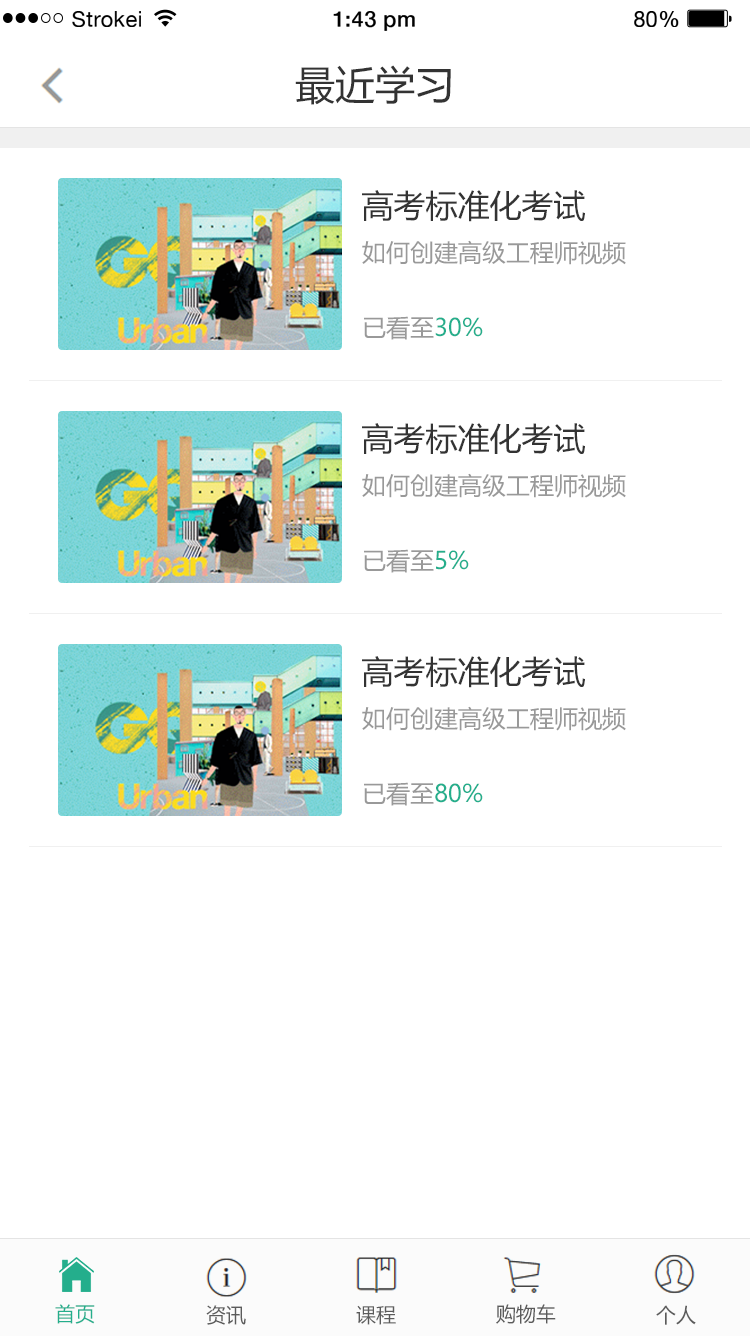
<style>
.page{position:relative;width:750px;height:1336px;background:#ffffff}
.page>*{position:absolute;margin:0}
.t1{font:21.8px "HelveticaNeue";letter-spacing:0.02em;color:#000000}
.t2{font:21.8px "HelveticaNeue-Medium";letter-spacing:0.02em;color:#000000}
.t3{font:40px "MicrosoftYaHei";color:#333333}
.t4{font:32px "MicrosoftYaHei";color:#333333}
.t5{font:24px "MicrosoftYaHei";color:#999999}
.t6{font:24px "MicrosoftYaHei";color:#24ae8c}
.t7{font:20px "MicrosoftYaHei";color:#24ae8c}
.t8{font:20px "MicrosoftYaHei";color:#5b5b5b}
</style>
<div class="page">
<p class="t1" style="left:72px;top:11px;width:69px;height:16px">Strokei</p>
<p class="t2" style="left:333px;top:11px;width:82px;height:20px">1:43 pm</p>
<p class="t1" style="left:634px;top:11px;width:45px;height:16px">80<span class="t2">%</span></p>
<p class="t3" style="left:295px;top:65px;width:156px;height:40px">最近学习</p>
<p class="t4" style="left:362px;top:190px;width:223px;height:32px">高考标准化考试</p>
<p class="t5" style="left:362px;top:240px;width:264px;height:25px">如何创建高级工程师视频</p>
<p class="t5" style="left:364px;top:316px;width:119px;height:24px">已看至<span class="t6">30%</span></p>
<p class="t4" style="left:362px;top:423px;width:223px;height:32px">高考标准化考试</p>
<p class="t5" style="left:362px;top:473px;width:264px;height:25px">如何创建高级工程师视频</p>
<p class="t5" style="left:364px;top:549px;width:105px;height:24px">已看至<span class="t6">5%</span></p>
<p class="t4" style="left:362px;top:656px;width:223px;height:32px">高考标准化考试</p>
<p class="t5" style="left:362px;top:706px;width:264px;height:25px">如何创建高级工程师视频</p>
<p class="t5" style="left:364px;top:782px;width:119px;height:24px">已看至<span class="t6">80%</span></p>
<p class="t7" style="left:55px;top:1304px;width:40px;height:20px">首页</p>
<p class="t8" style="left:206px;top:1305px;width:40px;height:20px">资讯</p>
<p class="t8" style="left:356px;top:1305px;width:40px;height:20px">课程</p>
<p class="t8" style="left:496px;top:1304px;width:60px;height:20px">购物车</p>
<p class="t8" style="left:656px;top:1305px;width:40px;height:20px">个人</p>
</div>
